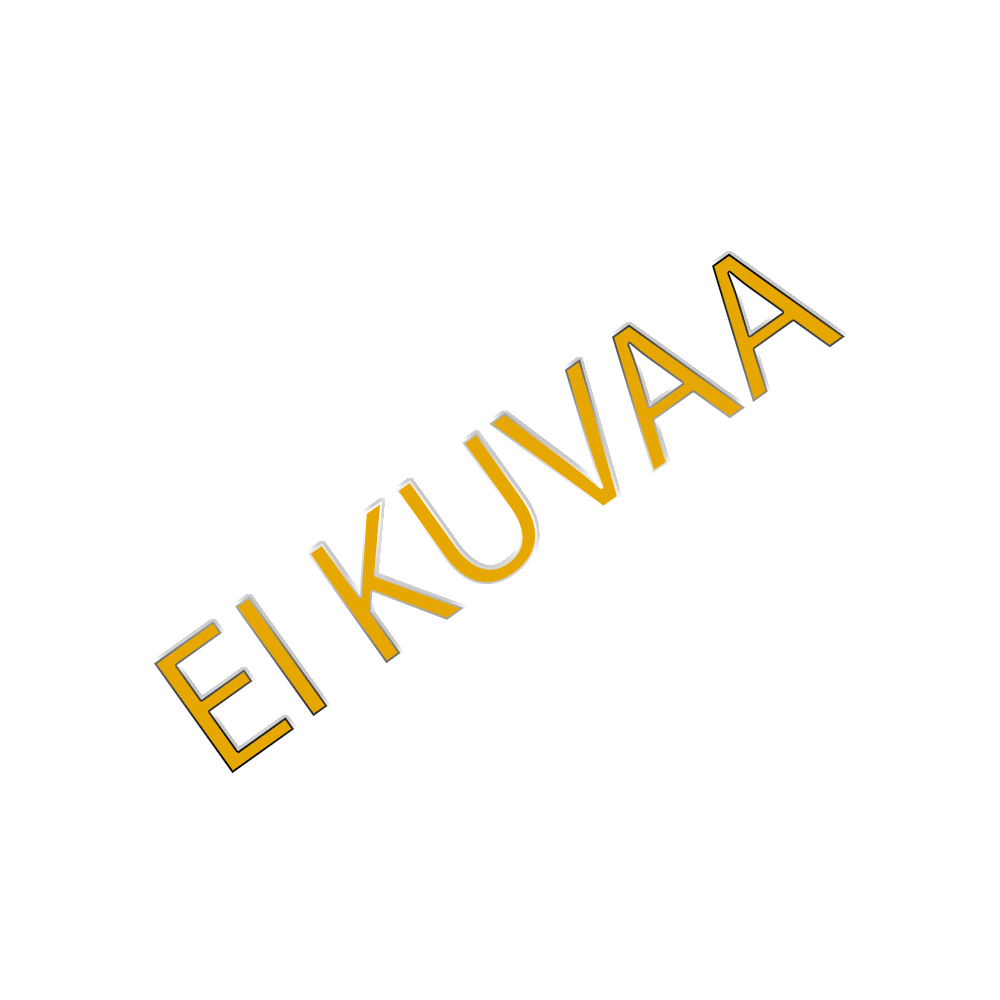
<style>
.page{position:relative;width:1000px;height:1000px;background:#ffffff}
.page>*{position:absolute;margin:0}
.t1{font:200px "MyriadPro-Regular";color:#e5a700}
</style>
<div class="page">
<p class="t1" style="left:154px;top:253px;width:691px;height:521px;rotate:-36deg">EI KUVAA</p>
</div>
